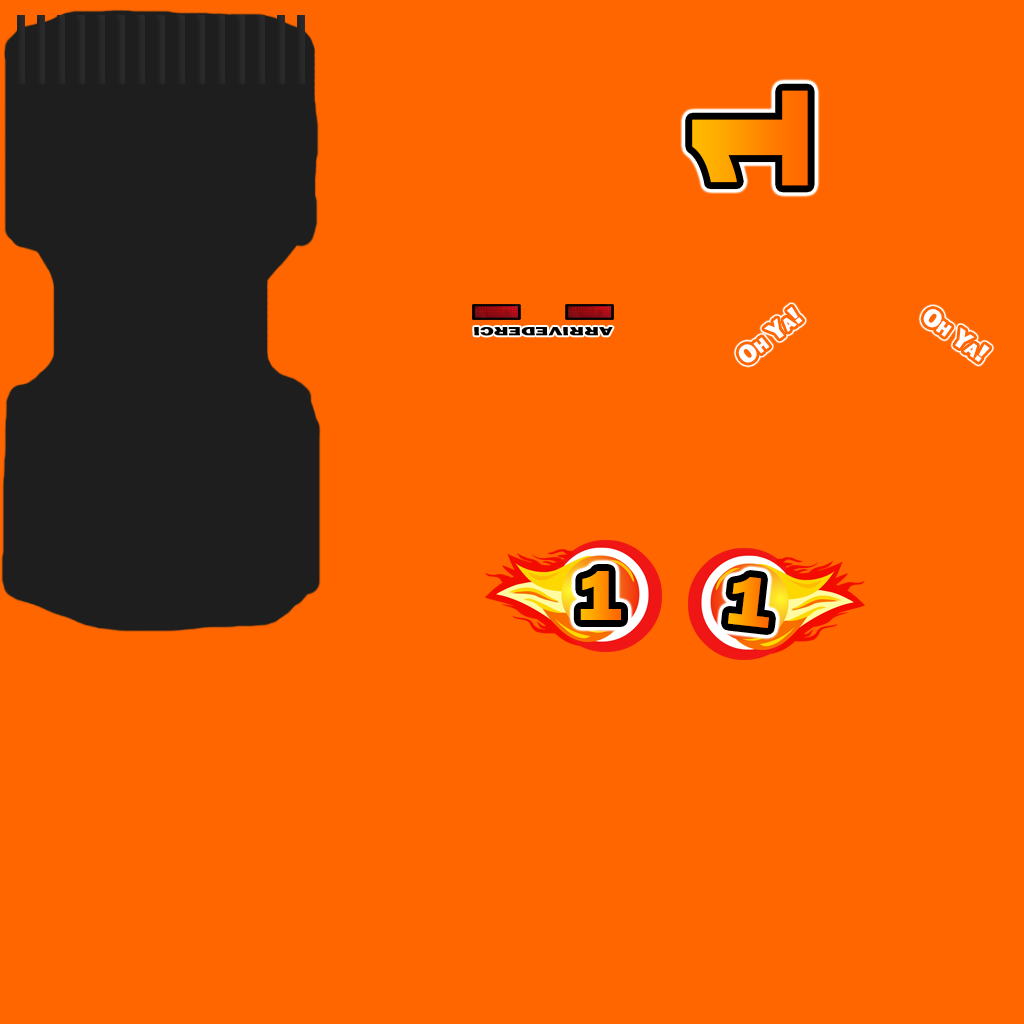
<style>
.page{position:relative;width:1024px;height:1024px;background:#ff6600}
.page>*{position:absolute;margin:0}
.t1{font:170.2px "FranklinGothic-Heavy";font-variant:small-caps;scale:1.08 1}
.t2{font:26.3px "FranklinGothic-Heavy";color:#ffffff;font-variant:small-caps}
.t3{font:72px "FranklinGothic-Heavy";font-variant:small-caps;scale:1.09 1}
</style>
<div class="page">
<p class="t1" style="left:692px;top:90px;width:116px;height:96px;rotate:-90deg">1</p>
<p class="t2" style="left:738px;top:306px;width:65px;height:57px;rotate:-39deg">Oh Ya!</p>
<p class="t2" style="left:923px;top:309px;width:67px;height:53px;rotate:36deg">Oh Ya!</p>
<p class="t3" style="left:580px;top:571px;width:41px;height:49px">1</p>
<p class="t3" style="left:728px;top:577px;width:41px;height:51px;rotate:6deg">1</p>
</div>
